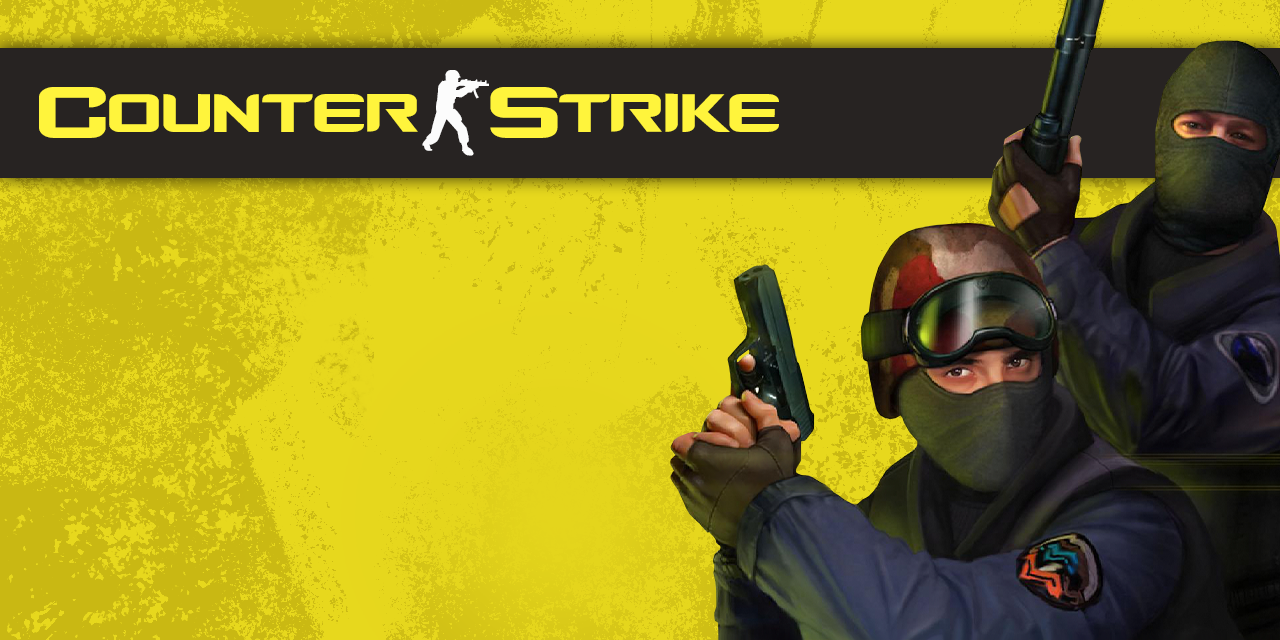
<style>
.page{position:relative;width:1280px;height:640px}
.page>*{position:absolute;margin:0}
.t1{font:100px "CSlogo";color:#fcfcfc;text-transform:uppercase}
.t2{font:100px "CSlogo";color:#fff43c;text-transform:uppercase}
</style>
<div class="page">
<p class="t1" style="left:422px;top:70px;width:67px;height:86px">-</p>
<p class="t2" style="left:39px;top:87px;width:67px;height:51px">C</p>
<p class="t2" style="left:490px;top:87px;width:68px;height:51px">S</p>
<p class="t2" style="left:109px;top:94px;width:309px;height:38px">ounter</p>
<p class="t2" style="left:559px;top:93px;width:220px;height:39px">trike</p>
</div>
